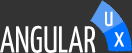
<style>
.page{position:relative;width:132px;height:53px;background:#333333}
.page>*{position:absolute;margin:0}
.t1{font:28.4px "YanoneKaffeesatz-Regular";color:#ffffff;scale:0.91 1}
.t2{font:37.6px "YanoneKaffeesatz-Regular";color:#ffffff;scale:0.91 1}
</style>
<div class="page">
<p class="t1" style="left:105px;top:11px;width:8px;height:16px">u</p>
<p class="t2" style="left:0px;top:25px;width:96px;height:28px">ANGULAR</p>
<p class="t1" style="left:114px;top:32px;width:10px;height:15px">x</p>
</div>
